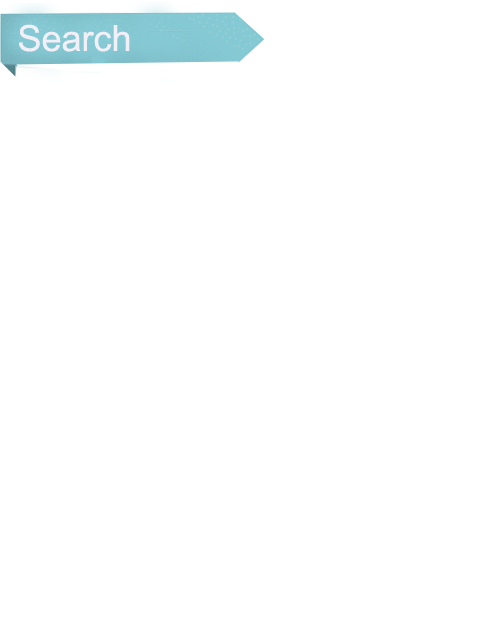
<style>
.page{position:relative;width:495px;height:619px;background:#ffffff}
.page>*{position:absolute;margin:0}
.t1{font:36px "DokChampa";color:#f3eff7}
</style>
<div class="page">
<p class="t1" style="left:19px;top:24px;width:111px;height:28px">Search</p>
</div>
